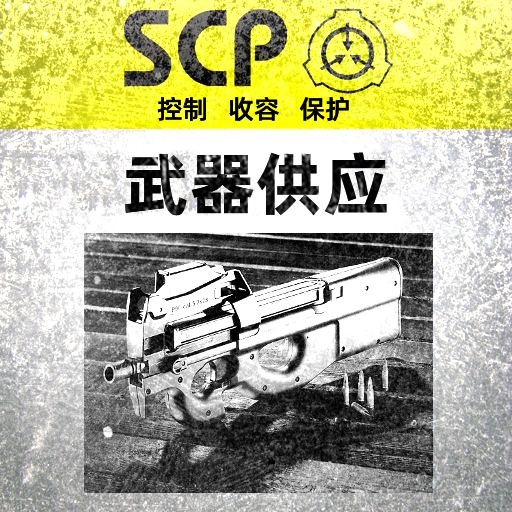
<style>
.page{position:relative;width:512px;height:512px}
.page>*{position:absolute;margin:0}
.t1{font:26.1px "AlibabaPuHuiTiM";color:#000000}
.t2{font:68.2px "AlibabaPuHuiTiB";color:#000000}
</style>
<div class="page">
<p class="t1" style="left:157px;top:96px;width:192px;height:26px">控制   收容   保护</p>
<p class="t2" style="left:125px;top:152px;width:262px;height:64px">武器供应</p>
</div>
